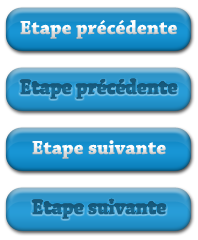
<style>
.page{position:relative;width:198px;height:240px;background:#ffffff}
.page>*{position:absolute;margin:0}
.t1{font:20px "ChaparralPro-Bold"}
.t2{font:20px "ChaparralPro-Bold";color:#185d82}
</style>
<div class="page">
<p class="t1" style="left:20px;top:20px;width:157px;height:19px">Etape précédente</p>
<p class="t2" style="left:20px;top:80px;width:157px;height:19px">Etape précédente</p>
<p class="t1" style="left:32px;top:140px;width:134px;height:19px">Etape suivante</p>
<p class="t2" style="left:32px;top:200px;width:134px;height:19px">Etape suivante</p>
</div>
